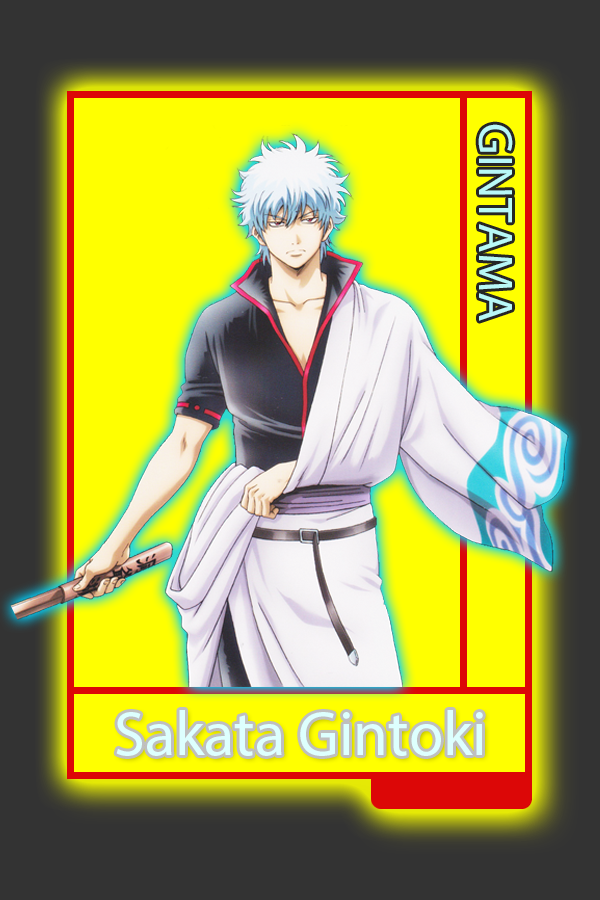
<style>
.page{position:relative;width:600px;height:900px;background:#ffff00}
.page>*{position:absolute;margin:0}
.t1{font:48.8px "MyriadPro-Regular";color:#b8f8f7}
.t2{font:62.5px "MyriadPro-Regular";color:#ddfffe}
</style>
<div class="page">
<p class="t1" style="left:478px;top:124px;width:35px;height:197px;rotate:90deg">GINTAMA</p>
<p class="t2" style="left:116px;top:710px;width:367px;height:46px">Sakata Gintoki</p>
</div>
